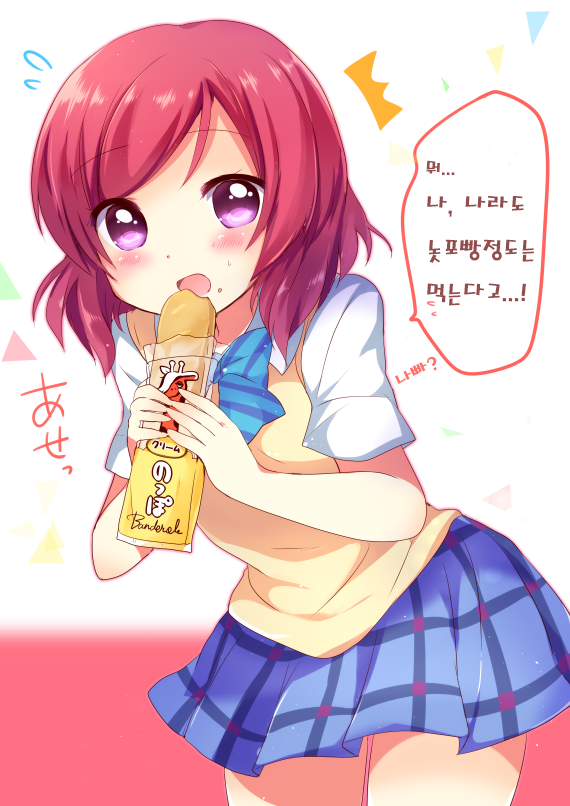
<style>
.page{position:relative;width:570px;height:806px;background:#ffffff}
.page>*{position:absolute;margin:0}
.t1{font:25px "MagicR-HM";color:#934d4d}
.t2{font:20px "MagicR-HM";color:#934d4d}
.t3{font:20px "MagicR-HM";color:#ff726c}
</style>
<div class="page">
<p class="t1" style="left:426px;top:160px;width:108px;height:146px"><span class="t2">뭐...<br></span>나, 나라도<br>놋포빵정도는<br>먹는다고...!</p>
<p class="t3" style="left:395px;top:356px;width:42px;height:28px;rotate:-28deg">나빠?</p>
</div>
